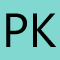
<style>
.page{position:relative;width:60px;height:60px;background:#81d8d0}
.page>*{position:absolute;margin:0}
.t1{font:48px "Gadugi";color:#000202}
</style>
<div class="page">
<p class="t1" style="left:6px;top:13px;width:51px;height:34px">PK</p>
</div>
